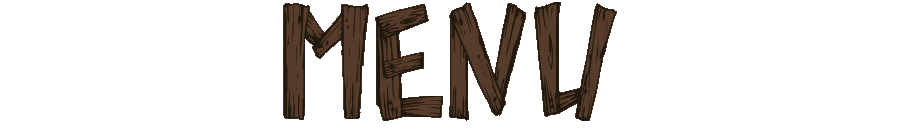
<style>
.page{position:relative;width:900px;height:130px;background:#ffffff}
.page>*{position:absolute;margin:0}
.t1{font:150px "WoodWud";color:#1f190e}
</style>
<div class="page">
<p class="t1" style="left:283px;top:2px;width:334px;height:119px">MENU</p>
</div>
